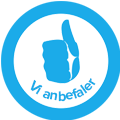
<style>
.page{position:relative;width:120px;height:120px;background:#ffffff}
.page>*{position:absolute;margin:0}
.t1{font:14.4px "ProximaNova-Bold";color:#1babe9}
</style>
<div class="page">
<p class="t1" style="left:30px;top:78px;width:66px;height:24px">Vi anbefaler</p>
</div>
